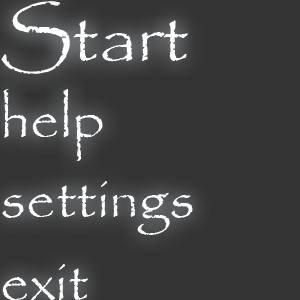
<style>
.page{position:relative;width:300px;height:300px;background:#333333}
.page>*{position:absolute;margin:0}
.t1{font:75px "Papyrus-Regular";color:#ffffff}
.t2{font:58.3px "Papyrus-Regular";color:#ffffff}
</style>
<div class="page">
<p class="t1" style="left:1px;top:1px;width:187px;height:73px">Start</p>
<p class="t2" style="left:3px;top:89px;width:100px;height:72px">help</p>
<p class="t2" style="left:2px;top:181px;width:191px;height:54px">settings</p>
<p class="t2" style="left:2px;top:264px;width:86px;height:37px">exit</p>
</div>
